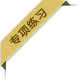
<style>
.page{position:relative;width:80px;height:81px;background:#ffffff}
.page>*{position:absolute;margin:0}
.t1{font:10px "MicrosoftYaHei";letter-spacing:0.1em;color:#5b4400;scale:1.1 1}
</style>
<div class="page">
<p class="t1" style="left:9px;top:8px;width:38px;height:36px;rotate:-45deg">专项练习</p>
</div>
